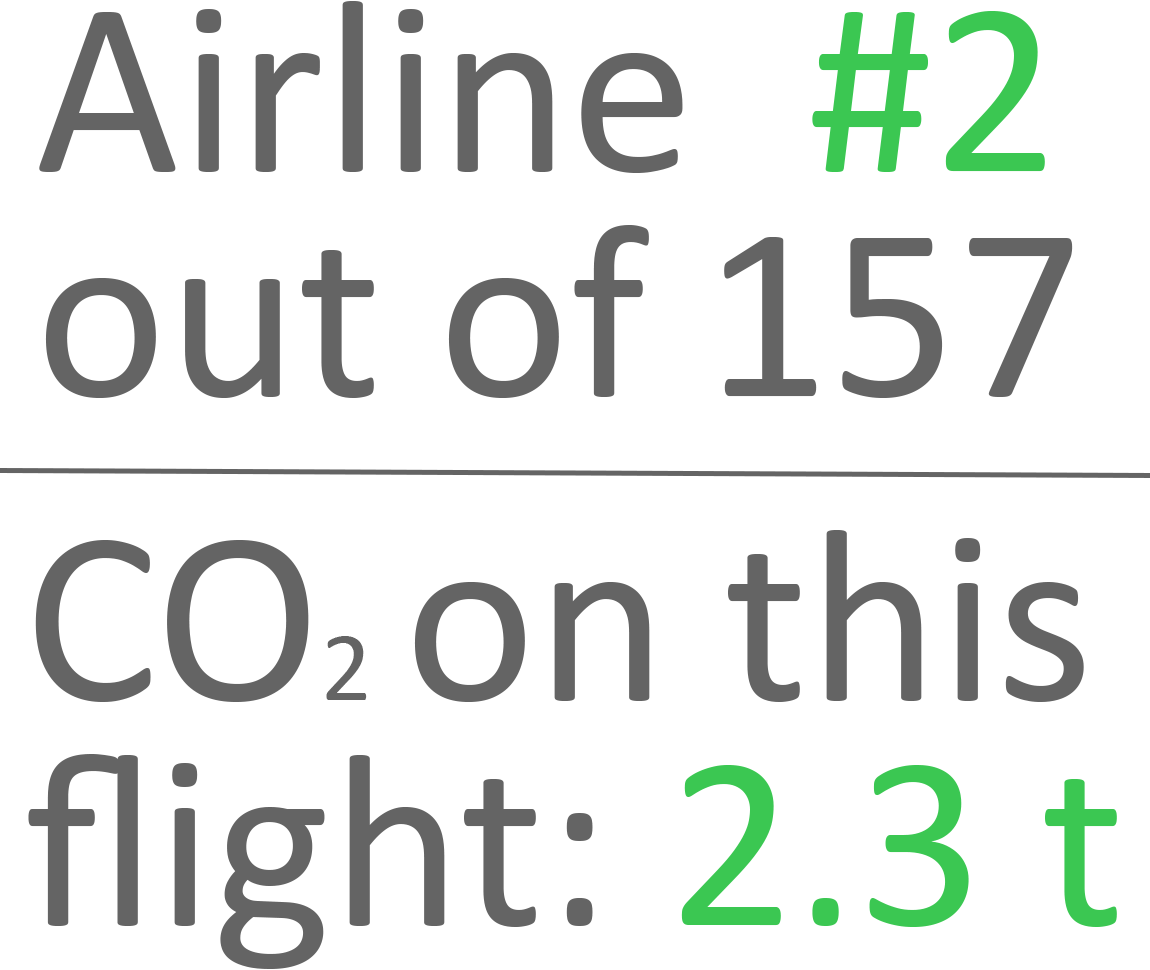
<style>
.page{position:relative;width:1150px;height:970px;background:#ffffff}
.page>*{position:absolute;margin:0}
.t1{font:250px/225px "Calibri";color:#646464}
.t2{font:250px/225px "Calibri";color:#3bc752}
.t3{font:100px/225px "Calibri";color:#646464}
</style>
<div class="page">
<p class="t1" style="left:39px;top:1px;width:1034px;height:397px">Airline  <span class="t2">#2<br></span>out of 157</p>
<p class="t1" style="left:28px;top:530px;width:1089px;height:439px">CO<span class="t3">2 </span>on this flight: <span class="t2">2.3 t</span></p>
</div>
